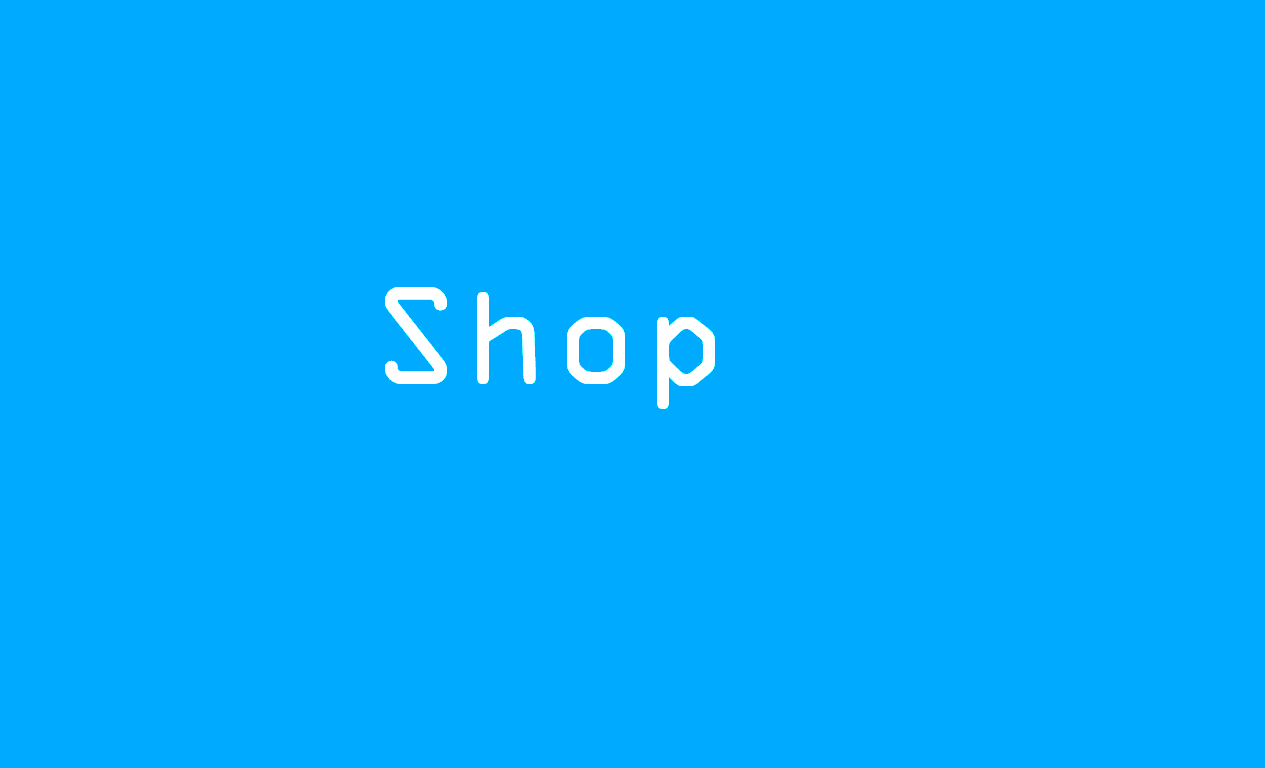
<style>
.page{position:relative;width:1265px;height:768px;background:#00aaff}
.page>*{position:absolute;margin:0}
.t1{font:125px "OCRAStd";color:#faf4f4}
</style>
<div class="page">
<p class="t1" style="left:385px;top:287px;width:330px;height:122px">Shop</p>
</div>
